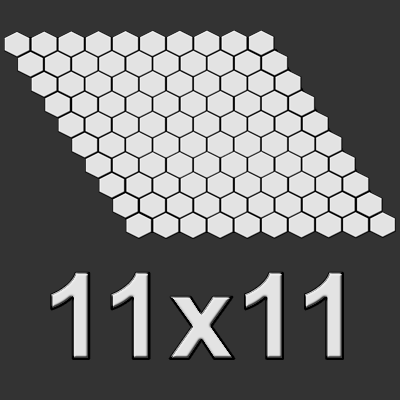
<style>
.page{position:relative;width:400px;height:400px;background:#333333}
.page>*{position:absolute;margin:0}
.t1{font:120px "Arial-BoldMT";color:#e3e3e3}
</style>
<div class="page">
<p class="t1" style="left:51px;top:272px;width:292px;height:87px">11x11</p>
</div>
